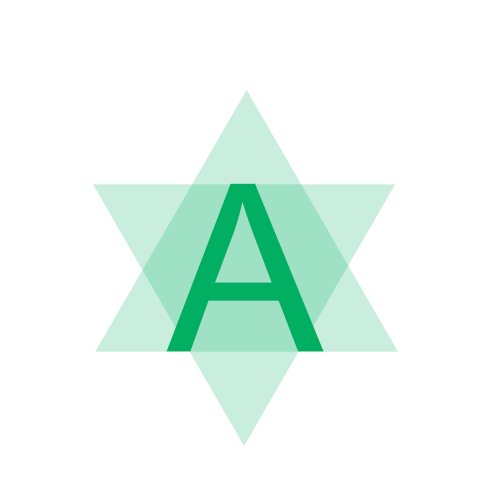
<style>
.page{position:relative;width:500px;height:500px;background:#ffffff}
.page>*{position:absolute;margin:0}
.t1{font:234px "ArialMT";color:#00af62}
</style>
<div class="page">
<p class="t1" style="left:166px;top:183px;width:158px;height:169px">A</p>
</div>
